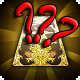
<style>
.page{position:relative;width:80px;height:80px}
.page>*{position:absolute;margin:0}
.t1{font:59.5px "BrushScriptMT";letter-spacing:-0.02em}
</style>
<div class="page">
<p class="t1" style="left:15px;top:2px;width:18px;height:42px;rotate:-26deg">?</p>
<p class="t1" style="left:34px;top:4px;width:23px;height:40px;rotate:5deg">?</p>
<p class="t1" style="left:43px;top:16px;width:35px;height:31px;rotate:32deg">?</p>
</div>
